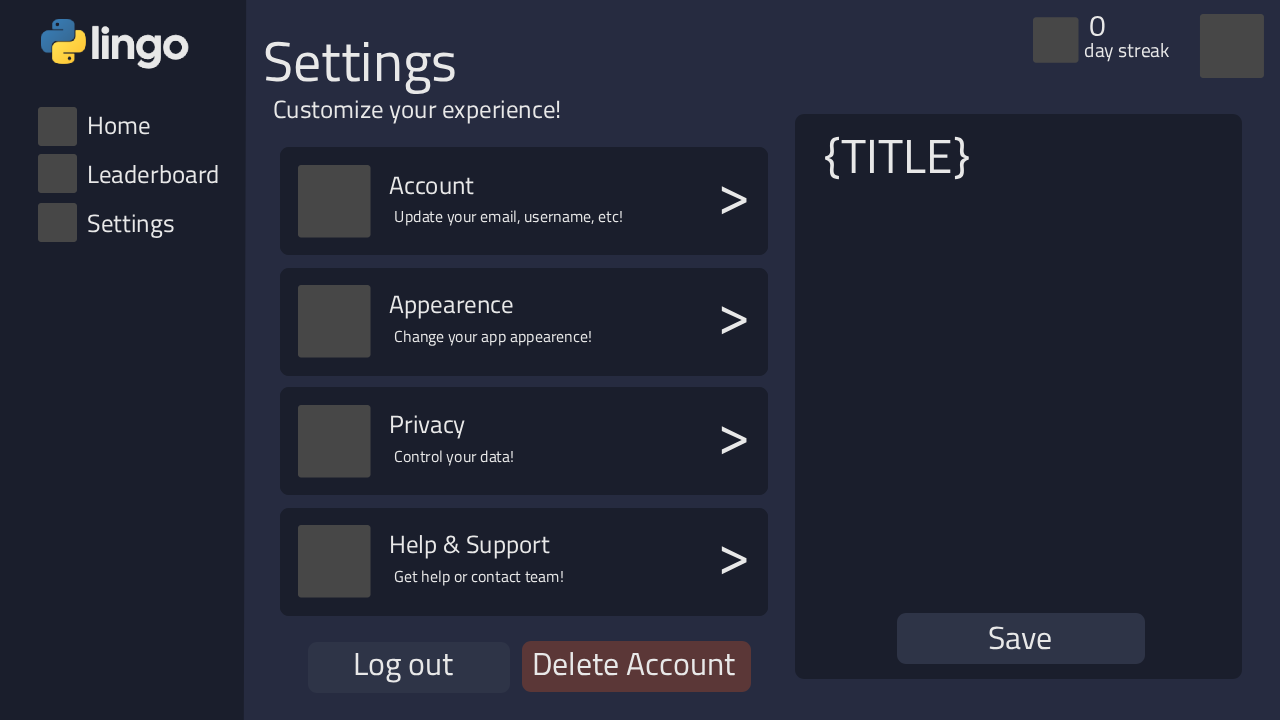
<style>
.page{position:relative;width:1280px;height:720px;background:#1a1e2c}
.page>*{position:absolute;margin:0}
.t1{font:29.5px "Cairo-Regular";color:#e8e8e8}
.t2{font:55.8px "Cairo-Regular";color:#e8e8e8}
.t3{font:19.5px "Cairo-Regular";color:#e8e8e8}
.t4{font:25px "Cairo-Regular";color:#e8e8e8}
.t5{font:47.9px "Cairo-Regular";color:#e8e8e8}
.t6{font:59.2px "Cairo-Regular";color:#e8e8e8}
.t7{font:15.9px "Cairo-Regular";color:#e8e8e8}
.t8{font:32px "Cairo-Regular";color:#e8e8e8}
</style>
<div class="page">
<p class="t1" style="left:1090px;top:16px;width:15px;height:20px;rotate:1deg">0</p>
<p class="t2" style="left:265px;top:41px;width:190px;height:54px">Settings</p>
<p class="t3" style="left:1084px;top:43px;width:85px;height:19px">day streak</p>
<p class="t4" style="left:274px;top:100px;width:286px;height:24px">Customize your experience!</p>
<p class="t4" style="left:89px;top:116px;width:61px;height:19px">Home</p>
<p class="t5" style="left:825px;top:136px;width:144px;height:44px">{TITLE}</p>
<p class="t4" style="left:89px;top:165px;width:129px;height:19px">Leaderboard</p>
<p class="t4" style="left:389px;top:176px;width:85px;height:19px">Account</p>
<p class="t6" style="left:721px;top:186px;width:26px;height:29px">&gt;</p>
<p class="t4" style="left:88px;top:214px;width:86px;height:24px">Settings</p>
<p class="t7" style="left:395px;top:210px;width:227px;height:16px">Update your email, username, etc!</p>
<p class="t4" style="left:389px;top:295px;width:124px;height:24px">Appearence</p>
<p class="t6" style="left:721px;top:306px;width:26px;height:29px">&gt;</p>
<p class="t7" style="left:394px;top:330px;width:197px;height:16px">Change your app appearence!</p>
<p class="t4" style="left:391px;top:415px;width:74px;height:24px">Privacy</p>
<p class="t6" style="left:721px;top:426px;width:26px;height:29px">&gt;</p>
<p class="t7" style="left:394px;top:450px;width:119px;height:16px">Control your data!</p>
<p class="t4" style="left:391px;top:535px;width:159px;height:24px">Help &amp; Support</p>
<p class="t6" style="left:721px;top:546px;width:26px;height:29px">&gt;</p>
<p class="t7" style="left:394px;top:570px;width:169px;height:16px">Get help or contact team!</p>
<p class="t8" style="left:989px;top:626px;width:62px;height:24px">Save</p>
<p class="t8" style="left:355px;top:652px;width:98px;height:31px">Log out</p>
<p class="t8" style="left:534px;top:652px;width:201px;height:24px">Delete Account</p>
</div>
